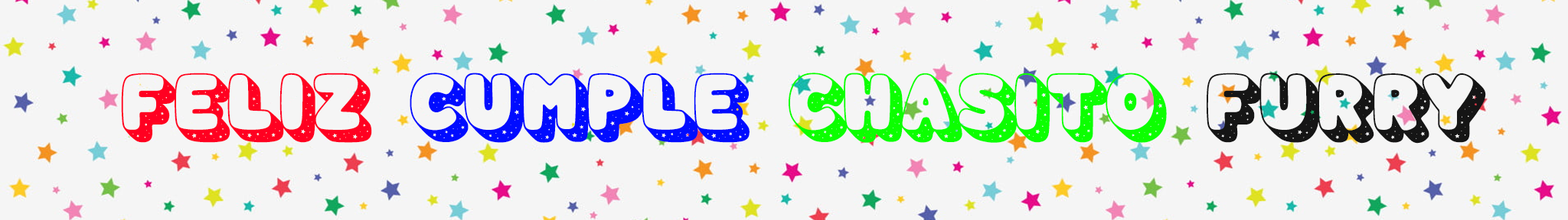
<style>
.page{position:relative;width:1568px;height:220px;background:#f5f5f5}
.page>*{position:absolute;margin:0}
.t1{font:82.7px "SpaceTime-Regular";color:#0cff00}
.t2{font:82.7px "SpaceTime-Regular";color:#ff0021}
.t3{font:82.7px "SpaceTime-Regular";color:#000cff}
.t4{font:82.7px "SpaceTime-Regular";color:#151515}
</style>
<div class="page">
<p class="t1" style="left:121px;top:73px;width:1365px;height:71px"><span class="t2">Feliz </span><span class="t3">Cumple </span>Chasito<span class="t4"> Furry</span></p>
</div>
